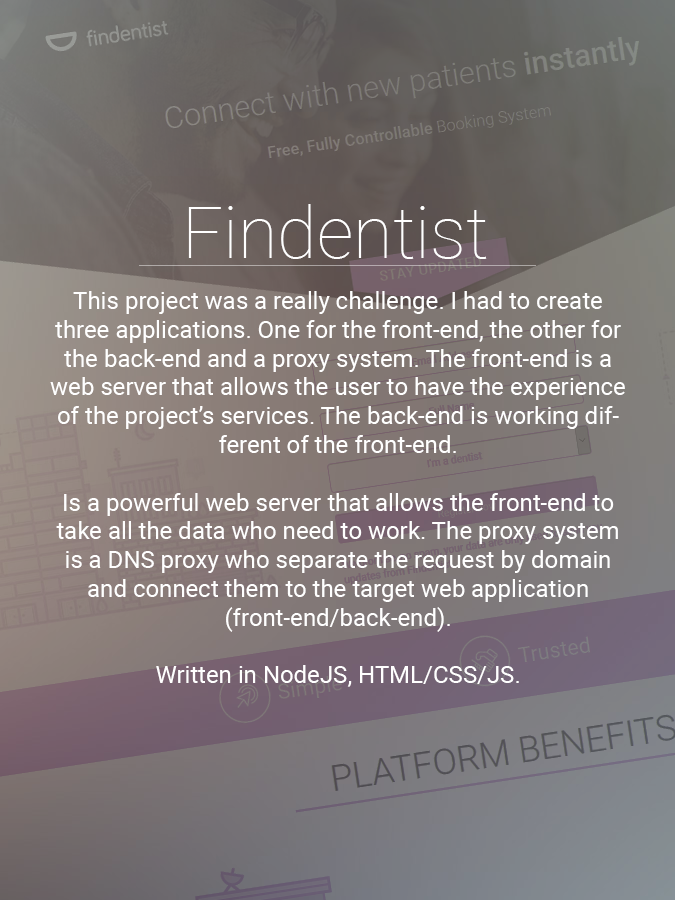
<style>
.page{position:relative;width:675px;height:900px}
.page>*{position:absolute;margin:0}
.t1{font:72px "Roboto-Thin";color:#ffffff}
.t2{font:24px "Roboto-Regular";color:#ffffff}
</style>
<div class="page">
<p class="t1" style="left:188px;top:204px;width:299px;height:55px">Findentist</p>
<p class="t2" style="left:50px;top:291px;width:575px;height:396px;text-align:center">This project was a really challenge. I had to create three applications. One for the front-end, the other for the back-end and a proxy system. The front-end is a web server that allows the user to have the experience of the project’s services. The back-end is working different of the front-end.<br><br>Is a powerful web server that allows the front-end to take all the data who need to work. The proxy system is a DNS proxy who separate the request by domain and connect them to the target web application (front-end/back-end). <br><br>Written in NodeJS, HTML/CSS/JS.</p>
</div>
